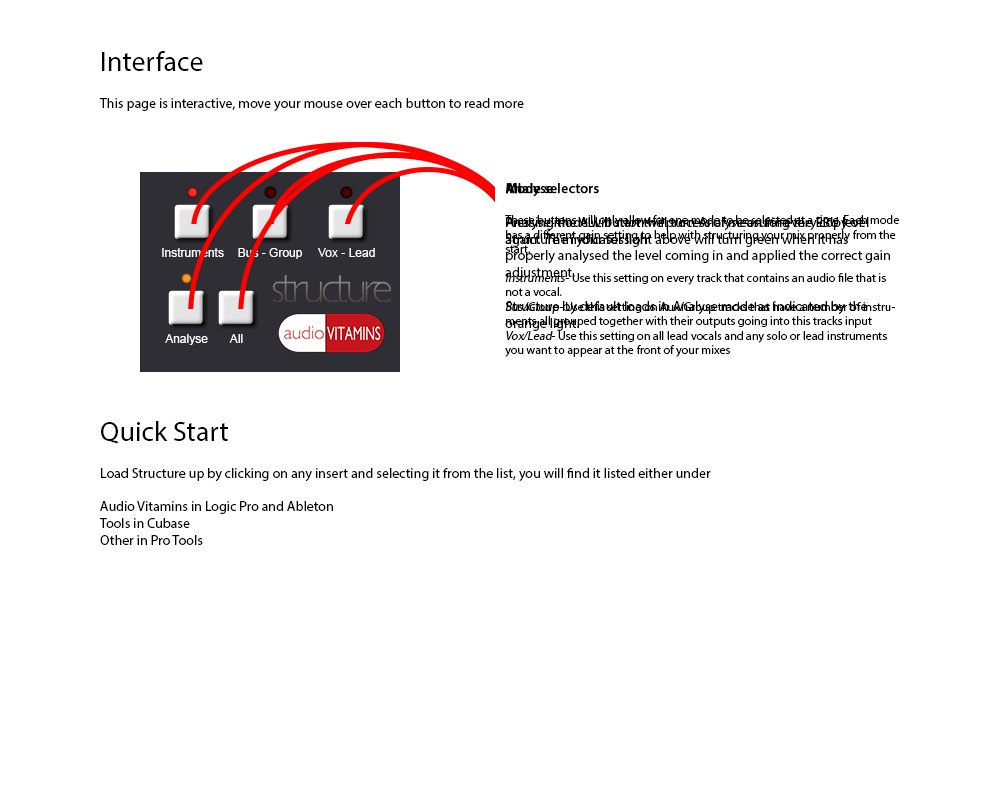
<style>
.page{position:relative;width:1000px;height:800px;background:#ffffff}
.page>*{position:absolute;margin:0}
.t1{font:28px "MyriadPro-Regular";color:#000000}
.t2{font:14px "MyriadPro-Regular";color:#000000}
.t3{font:12px "MyriadPro-Regular";color:#000000}
.t4{font:14px "MyriadPro-Regular";color:#000000;font-weight:bold}
.t5{font:12px "MyriadPro-Regular";color:#000000;font-style:italic}
</style>
<div class="page">
<p class="t1" style="left:102px;top:51px;width:101px;height:20px">Interface</p>
<p class="t2" style="left:99px;top:98px;width:425px;height:13px">This page is interactive, move your mouse over each button to read more</p>
<p class="t3" style="left:505px;top:183px;width:394px;height:174px"><span class="t4">Mode selectors<br><br></span>These buttons will only allow for one mode to be selected at a time. Each mode has a different gain setting to help with structuring your mix properly from the start.<br><br><span class="t5">Instruments- </span>Use this setting on every track that contains an audio file that is not a vocal.<br><span class="t5">Bus/Group- </span>Use this setting on Aux/Group tracks that have a number of instruments all grouped together with their outputs going into this tracks input<br><span class="t5">Vox/Lead- </span>Use this setting on all lead vocals and any solo or lead instruments you want to appear at the front of your mixes</p>
<p class="t2" style="left:505px;top:183px;width:385px;height:148px"><span class="t4">Analyse<br><br></span>Analyse mode will start the process of measuring the EBU level again.  The indicator light above will turn green when it has properly analysed the level coming in and applied the correct gain adjustment. <br><br>Structure by default loads in Analyse mode as indicated by the orange light.</p>
<p class="t2" style="left:505px;top:183px;width:359px;height:65px"><span class="t4">All<br><br></span>Pressing the ALL button will turn Analyse on for every copy of Structure in your session</p>
<p class="t1" style="left:101px;top:421px;width:127px;height:23px">Quick Start</p>
<p class="t2" style="left:99px;top:468px;width:612px;height:77px">Load Structure up by clicking on any insert and selecting it from the list, you will find it listed either under <br><br>Audio Vitamins in Logic Pro and Ableton<br>Tools in Cubase<br>Other in Pro Tools</p>
</div>
